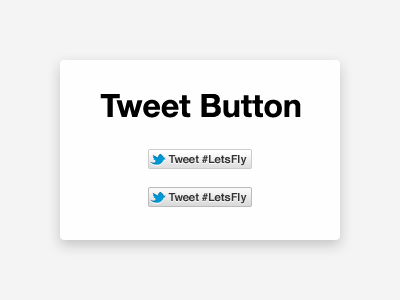
<style>
.page{position:relative;width:400px;height:300px;background:#f4f4f4}
.page>*{position:absolute;margin:0}
.t1{font:32px "HelveticaNeue-Bold";color:#000000}
.t2{font:11px "Helvetica-Bold";color:#333333}
</style>
<div class="page">
<p class="t1" style="left:100px;top:94px;width:201px;height:24px">Tweet Button</p>
<p class="t2" style="left:168px;top:155px;width:79px;height:11px">Tweet #LetsFly</p>
<p class="t2" style="left:168px;top:193px;width:79px;height:11px">Tweet #LetsFly</p>
</div>
